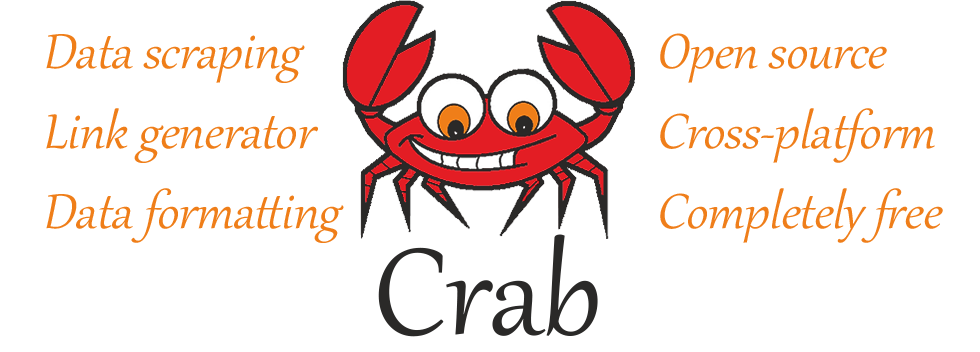
<style>
.page{position:relative;width:980px;height:352px;background:#ffffff}
.page>*{position:absolute;margin:0}
.t1{font:60px/80px "Gabriola";color:#ef7e19;font-style:italic}
.t2{font:60px/80px "Gabriola";color:#ef7e1a;font-style:italic}
.t3{font:150px "Gabriola";color:#2a2928}
</style>
<div class="page">
<p class="t1" style="left:46px;top:34px;width:298px;height:209px">Data scraping<br>Link generator<br>Data formatting</p>
<p class="t2" style="left:660px;top:33px;width:283px;height:210px">Open source<br>Cross-platform <br>Completely free</p>
<p class="t3" style="left:378px;top:234px;width:220px;height:103px">Crab</p>
</div>
